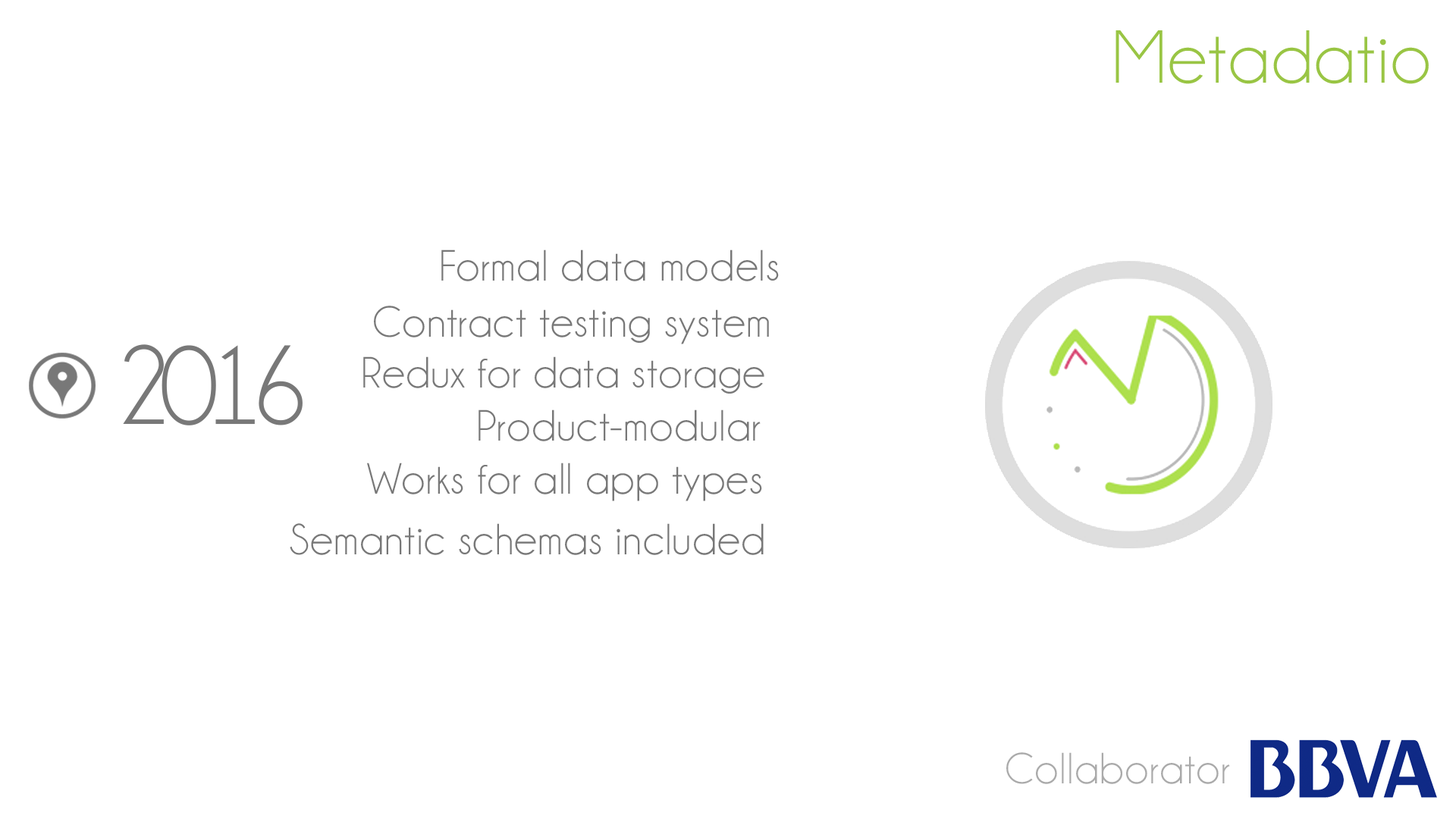
<style>
.page{position:relative;width:1456px;height:819px;background:#ffffff}
.page>*{position:absolute;margin:0}
.t1{font:75.8px "Champagne&Limousines";letter-spacing:0.02em;color:#99c544}
.t2{font:44.2px "Champagne&Limousines";letter-spacing:0.02em;color:#787878}
.t3{font:113.7px "Champagne&Limousines";letter-spacing:-0.12em;color:#787878}
.t4{font:44.2px "Champagne&Limousines";letter-spacing:0.02em;color:#aaaaaa}
</style>
<div class="page">
<p class="t1" style="left:1115px;top:30px;width:314px;height:54px">Metadatio</p>
<p class="t2" style="left:441px;top:249px;width:338px;height:32px">Formal data models</p>
<p class="t2" style="left:374px;top:306px;width:395px;height:38px">Contract testing system</p>
<p class="t3" style="left:123px;top:344px;width:180px;height:81px">2016</p>
<p class="t2" style="left:363px;top:356px;width:401px;height:38px">Redux for data storage</p>
<p class="t2" style="left:479px;top:409px;width:282px;height:32px">Product-modular</p>
<p class="t2" style="left:367px;top:463px;width:395px;height:38px">Works for all app types</p>
<p class="t2" style="left:290px;top:523px;width:474px;height:32px">Semantic schemas included</p>
<p class="t4" style="left:1006px;top:752px;width:224px;height:32px">Collaborator</p>
</div>
